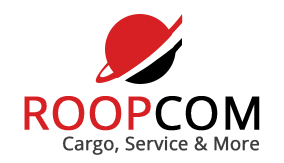
<style>
.page{position:relative;width:284px;height:163px;background:#ffffff}
.page>*{position:absolute;margin:0}
.t1{font:45.6px "OpenSans";color:#d72024;font-weight:bold}
.t2{font:45.6px "OpenSans";color:#000000;font-weight:bold}
.t3{font:18.6px "OpenSans";color:#3d3d3f;font-weight:bold}
</style>
<div class="page">
<p class="t1" style="left:24px;top:96px;width:236px;height:35px">ROOP<span class="t2">COM</span></p>
<p class="t3" style="left:62px;top:136px;width:198px;height:19px">Cargo, Service &amp; More</p>
</div>
